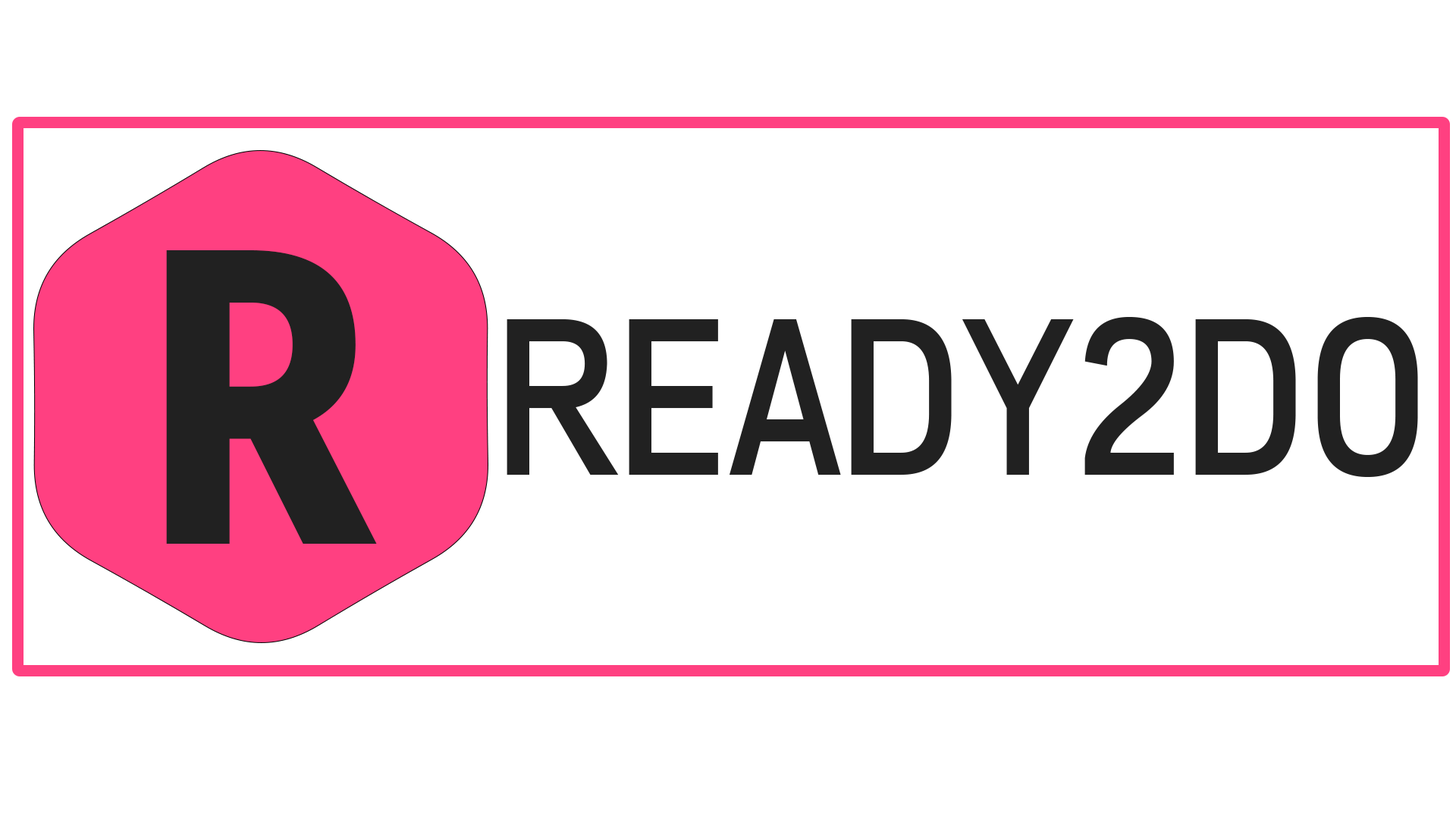
<style>
.page{position:relative;width:1456px;height:819px;background:#ffffff}
.page>*{position:absolute;margin:0}
.t1{font:429.7px "FreeroadBold";color:#212121}
.t2{font:227.5px "FreeroadRegular";color:#212121}
</style>
<div class="page">
<p class="t1" style="left:166px;top:250px;width:211px;height:294px">R</p>
<p class="t2" style="left:507px;top:317px;width:911px;height:160px">READY2DO</p>
</div>
